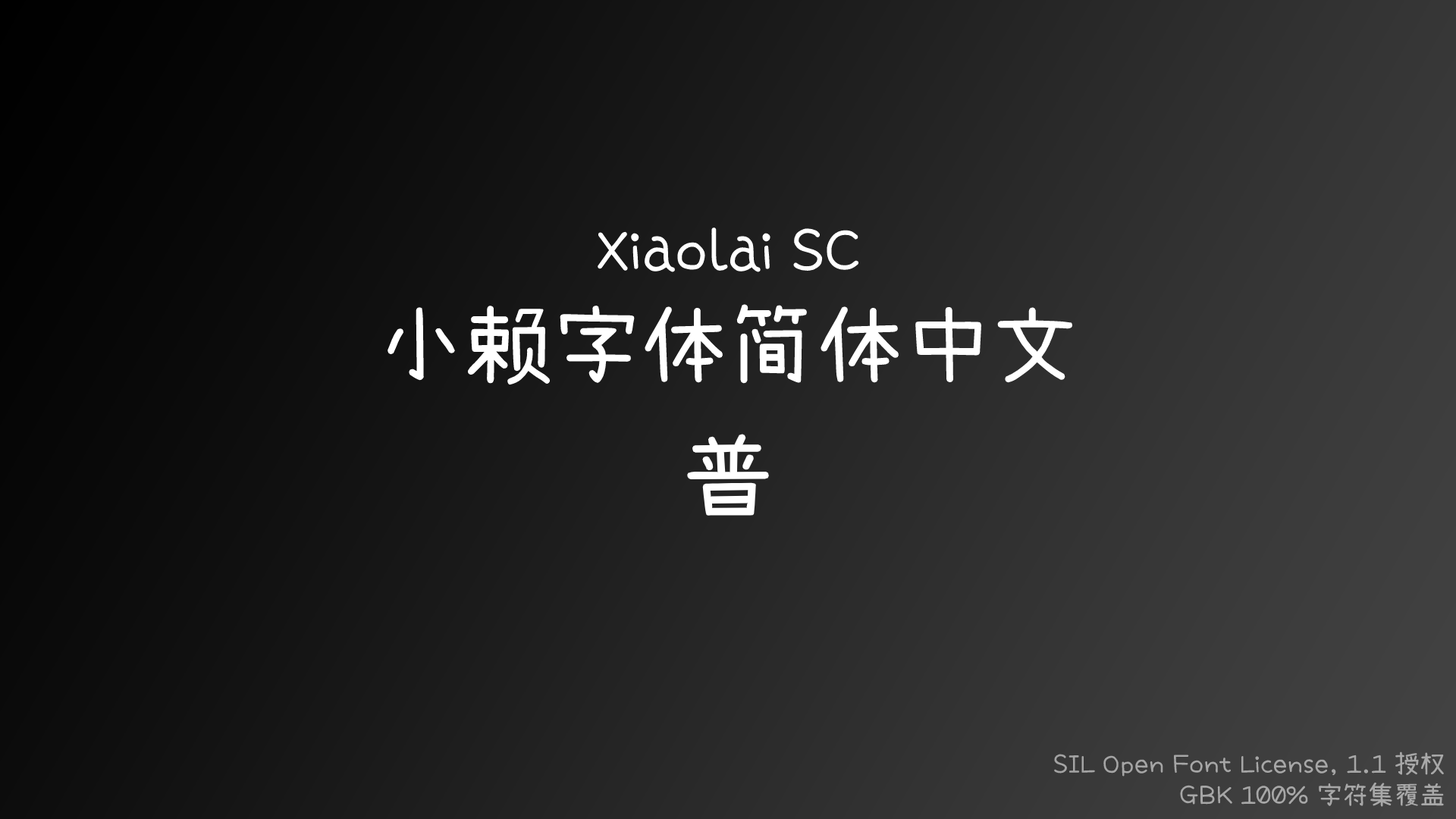
<style>
.page{position:relative;width:1456px;height:819px}
.page>*{position:absolute;margin:0}
.t1{font:57.6px "XiaolaiSC";color:#ffffff}
.t2{font:88px "XiaolaiSC";color:#ffffff}
.t3{font:95.5px "XiaolaiSC";color:#ffffff}
.t4{font:25.8px "XiaolaiSC";color:#a7a7a7}
</style>
<div class="page">
<p class="t1" style="left:388px;top:227px;width:685px;height:158px;text-align:center">Xiaolai SC<br><span class="t2">小赖字体简体中文</span></p>
<p class="t3" style="left:687px;top:434px;width:82px;height:82px">普</p>
<p class="t4" style="left:1054px;top:751px;width:390px;height:56px;text-align:right">SIL Open Font License, 1.1 授权<br> GBK 100% 字符集覆盖</p>
</div>
